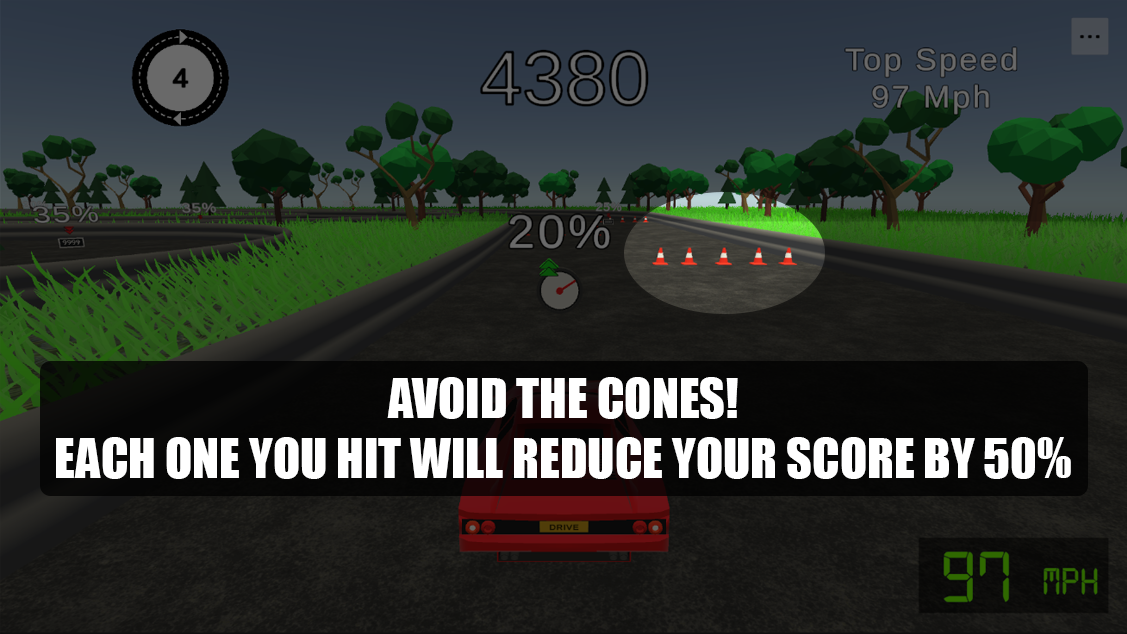
<style>
.page{position:relative;width:1127px;height:634px}
.page>*{position:absolute;margin:0}
.t1{font:50px "Impact";color:#ffffff;text-transform:uppercase}
</style>
<div class="page">
<p class="t1" style="left:56px;top:377px;width:1015px;height:102px;text-align:center">Avoid the cones!<br>Each one you hit will reduce your score by 50%</p>
</div>
